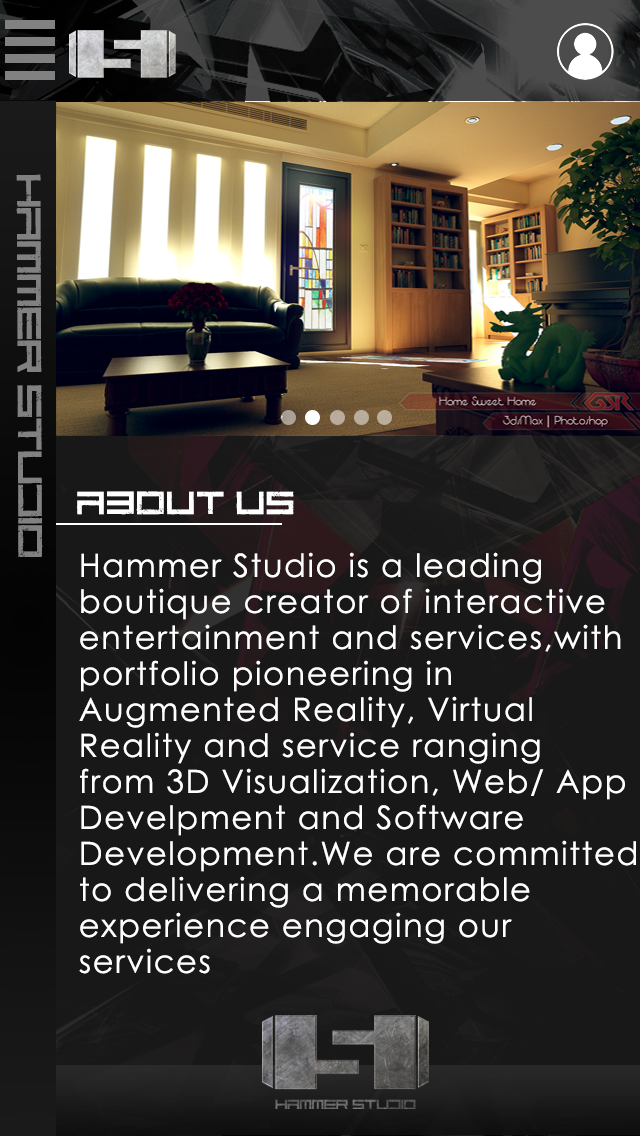
<style>
.page{position:relative;width:640px;height:1136px;background:#181818}
.page>*{position:absolute;margin:0}
.t1{font:42px "CodePredators-Regular";color:#818181;scale:1.13 1}
.t2{font:40px "CodePredators-Regular";letter-spacing:0.05em;color:#ffffff}
.t3{font:32px/36px "CenturyGothic";letter-spacing:0.05em;color:#ffffff}
</style>
<div class="page">
<p class="t1" style="left:16px;top:174px;width:27px;height:383px;rotate:90deg">Hammer Studio</p>
<p class="t2" style="left:77px;top:491px;width:217px;height:24px">About us</p>
<p class="t3" style="left:79px;top:552px;width:557px;height:422px;text-align:right">Hammer Studio is a leading <br>boutique creator of interactive <br>entertainment and services,with <br>portfolio pioneering in <br>Augmented Reality, Virtual <br>Reality and service ranging <br>from 3D Visualization, Web/ App<br>Develpment and Software <br>Development.We are committed<br>to delivering a memorable <br>experience engaging our <br>services</p>
</div>
